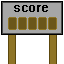
<style>
.page{position:relative;width:64px;height:64px;background:#ffffff}
.page>*{position:absolute;margin:0}
.t1{font:12px "System";color:#000000}
</style>
<div class="page">
<p class="t1" style="left:14px;top:5px;width:34px;height:7px">score</p>
</div>
